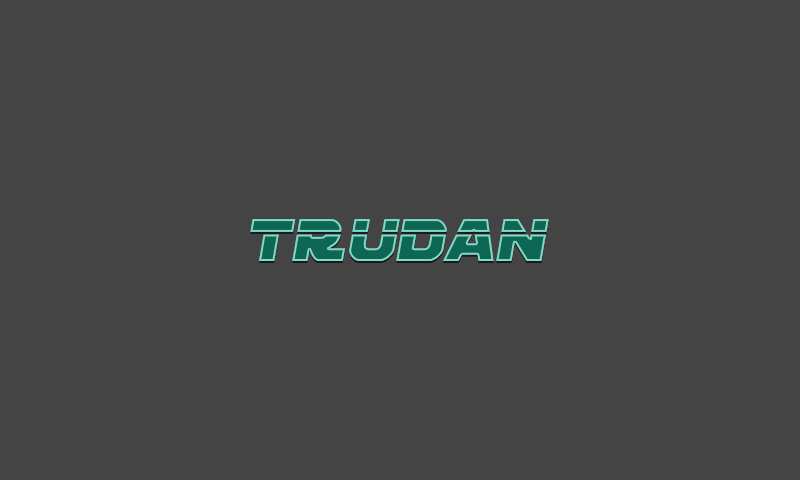
<style>
.page{position:relative;width:800px;height:480px;background:#444444}
.page>*{position:absolute;margin:0}
.t1{font:64px "SoloistLaser"}
</style>
<div class="page">
<p class="t1" style="left:250px;top:219px;width:299px;height:42px">TRUDAN</p>
</div>
